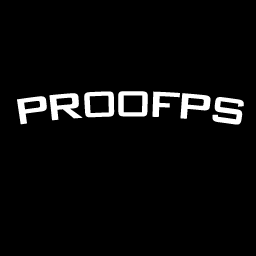
<style>
.page{position:relative;width:256px;height:256px;background:#000000}
.page>*{position:absolute;margin:0}
.t1{font:48px "BankGothicBT-Medium";letter-spacing:-0.1em;color:#ffffff}
</style>
<div class="page">
<p class="t1" style="left:17px;top:91px;width:227px;height:34px">PR00FPS</p>
</div>
